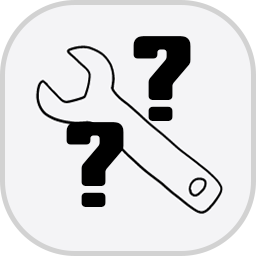
<style>
.page{position:relative;width:256px;height:256px;background:#f4f4f6}
.page>*{position:absolute;margin:0}
.t1{font:150px "YouSheBiaoTiYuan";color:#000000}
</style>
<div class="page">
<p class="t1" style="left:133px;top:36px;width:58px;height:85px">?</p>
<p class="t1" style="left:66px;top:122px;width:58px;height:85px">?</p>
</div>
